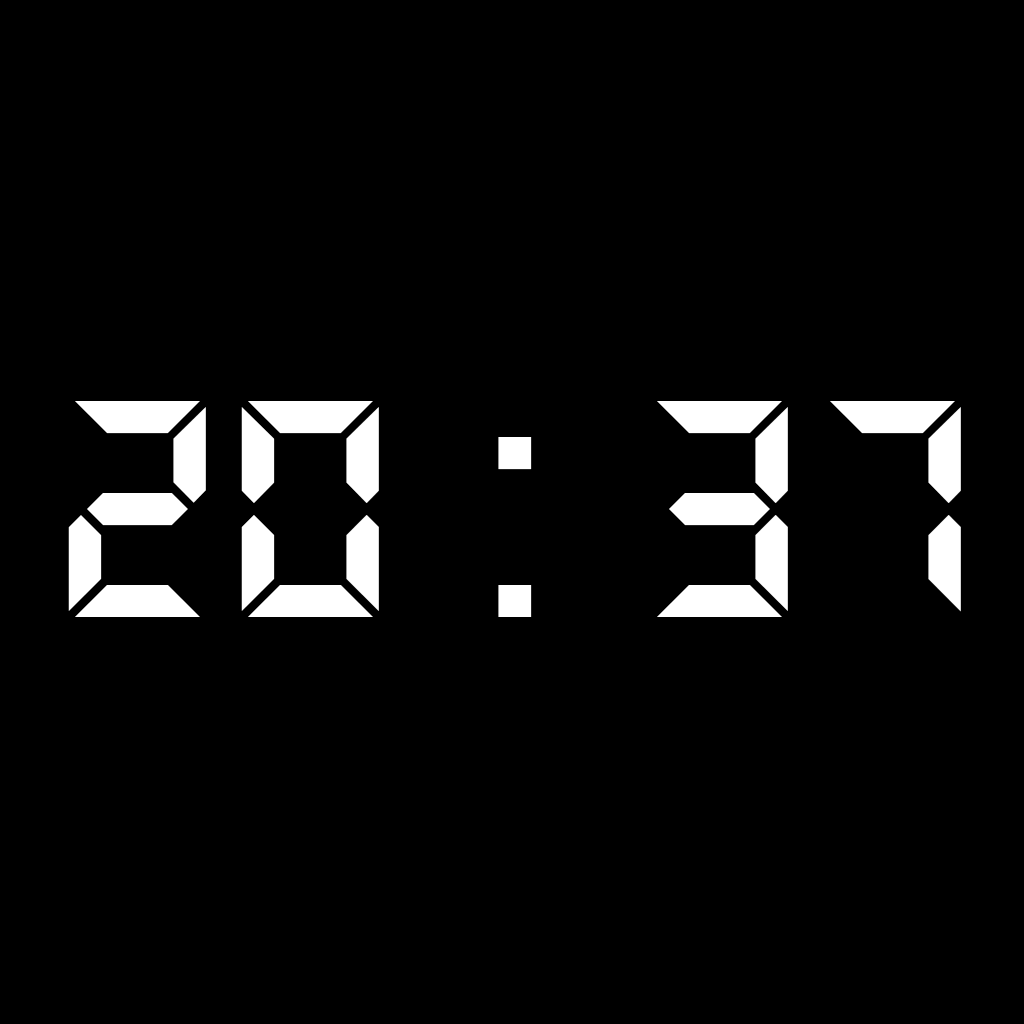
<style>
.page{position:relative;width:1024px;height:1024px;background:#000000}
.page>*{position:absolute;margin:0}
.t1{font:339.6px "DS-Digital-Bold";color:#ffffff;text-transform:uppercase}
</style>
<div class="page">
<p class="t1" style="left:68px;top:401px;width:893px;height:216px">20 : 37</p>
</div>
